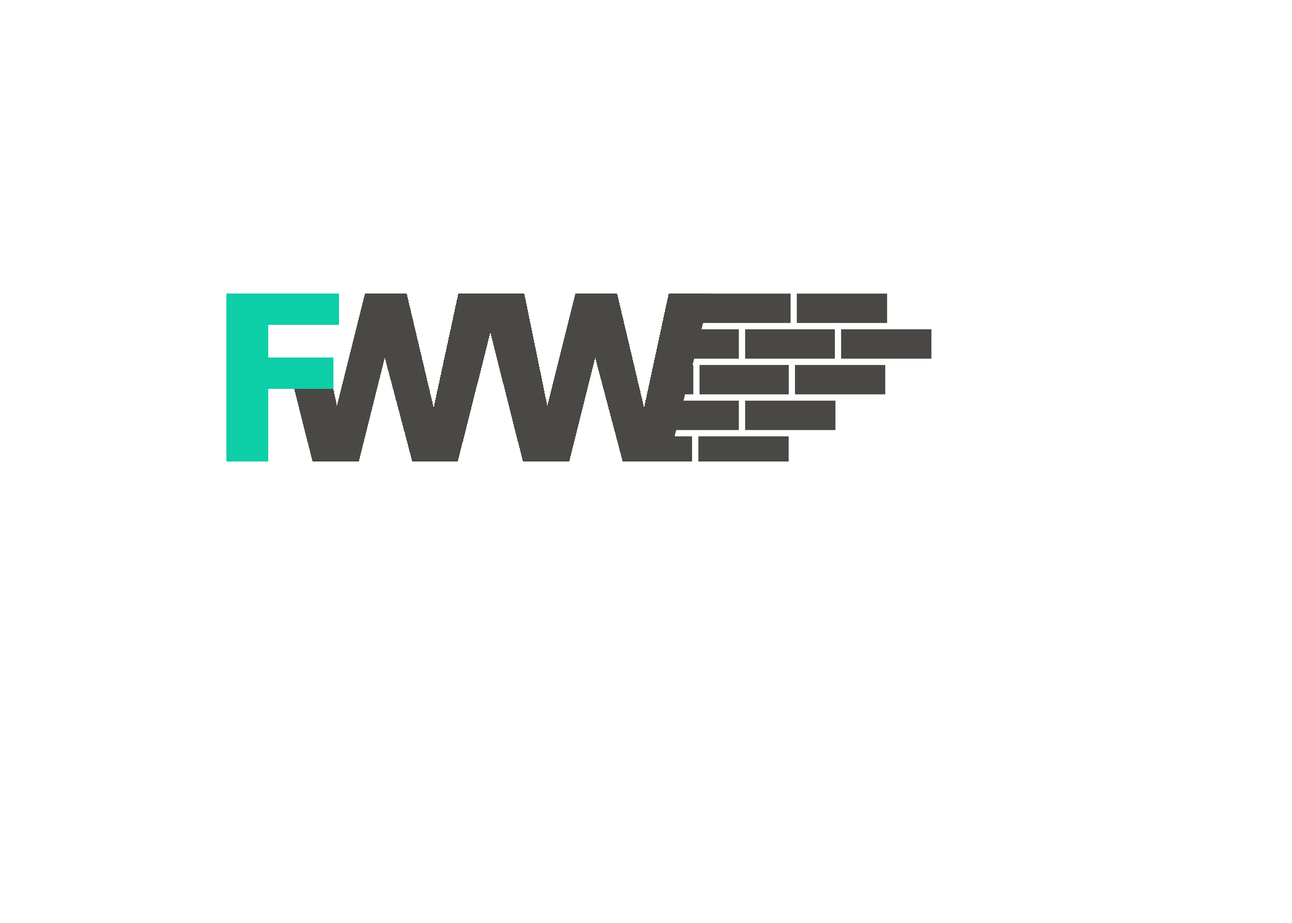
<style>
.page{position:relative;width:1292px;height:923px;background:#ffffff}
.page>*{position:absolute;margin:0}
.t1{font:230.7px "Tahoma-Bold";color:#0ecea7}
.t2{font:230.7px "Tahoma-Bold";color:#4a4844}
</style>
<div class="page">
<p class="t1" style="left:226px;top:293px;width:113px;height:168px">F</p>
<p class="t2" style="left:481px;top:293px;width:230px;height:168px">W</p>
</div>
